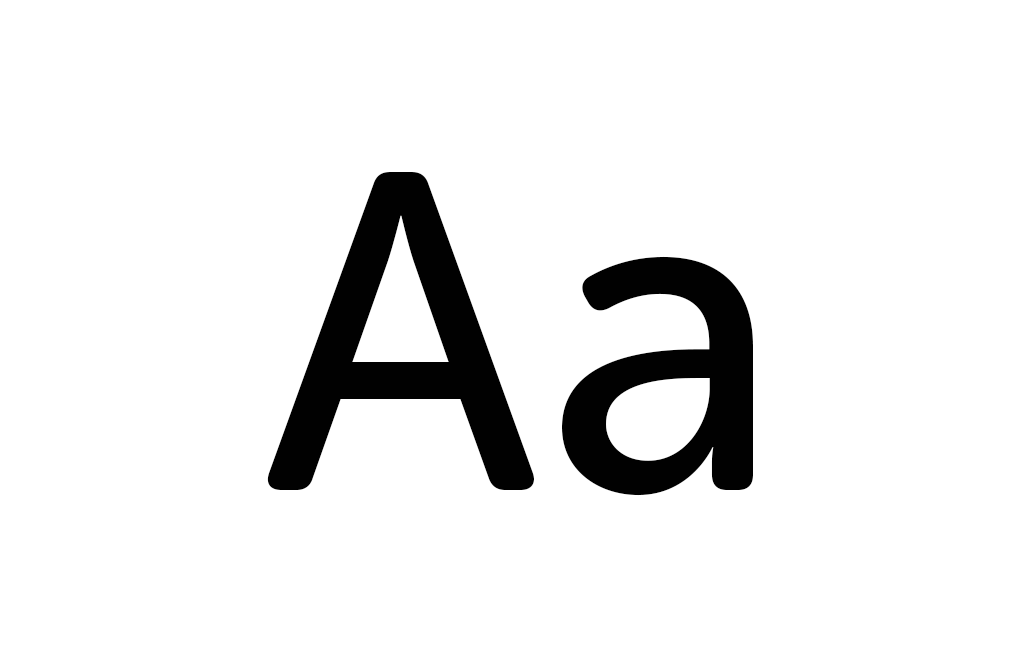
<style>
.page{position:relative;width:1020px;height:650px;background:#ffffff}
.page>*{position:absolute;margin:0}
.t1{font:450px "MuseoSansRounded-500";color:#010101}
</style>
<div class="page">
<p class="t1" style="left:267px;top:172px;width:486px;height:324px">Aa</p>
</div>
